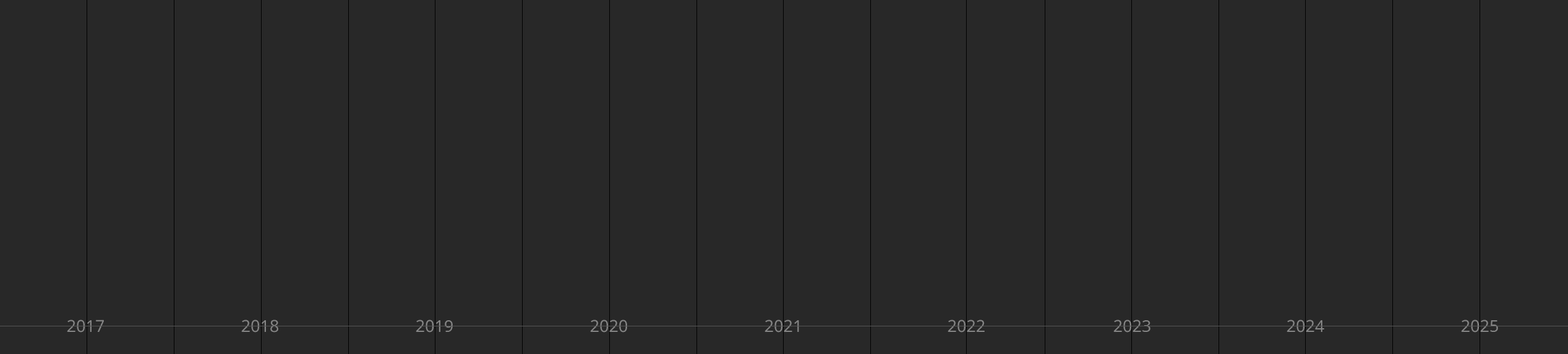
<style>
.page{position:relative;width:1568px;height:354px;background:#282828}
.page>*{position:absolute;margin:0}
.t1{font:16.6px "OpenSans-Regular";color:#868686}
</style>
<div class="page">
<p class="t1" style="left:67px;top:320px;width:37px;height:13px">2017</p>
<p class="t1" style="left:241px;top:320px;width:37px;height:13px">2018</p>
<p class="t1" style="left:416px;top:320px;width:37px;height:13px">2019</p>
<p class="t1" style="left:590px;top:320px;width:37px;height:13px">2020</p>
<p class="t1" style="left:765px;top:320px;width:34px;height:13px">2021</p>
<p class="t1" style="left:948px;top:320px;width:37px;height:13px">2022</p>
<p class="t1" style="left:1114px;top:320px;width:36px;height:13px">2023</p>
<p class="t1" style="left:1287px;top:320px;width:37px;height:13px">2024</p>
<p class="t1" style="left:1461px;top:320px;width:37px;height:13px">2025</p>
</div>
